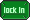
<style>
.page{position:relative;width:30px;height:20px;background:#07811e}
.page>*{position:absolute;margin:0}
.t1{font:8px "PhrasticMedium";color:#b4ffc2}
</style>
<div class="page">
<p class="t1" style="left:4px;top:7px;width:21px;height:6px">lock in</p>
</div>
